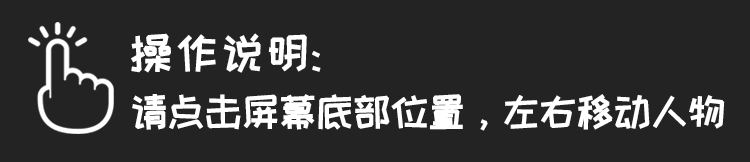
<style>
.page{position:relative;width:750px;height:162px;background:#232323}
.page>*{position:absolute;margin:0}
.t1{font:44.4px "HappyZcool-2016";color:#ffffff;font-weight:bold}
.t2{font:40.1px "HappyZcool-2016";letter-spacing:-0.1em;color:#ffffff;font-weight:bold}
</style>
<div class="page">
<p class="t1" style="left:131px;top:33px;width:190px;height:40px">操作说明:</p>
<p class="t2" style="left:132px;top:94px;width:593px;height:37px">请点击屏幕底部位置，左右移动人物</p>
</div>
